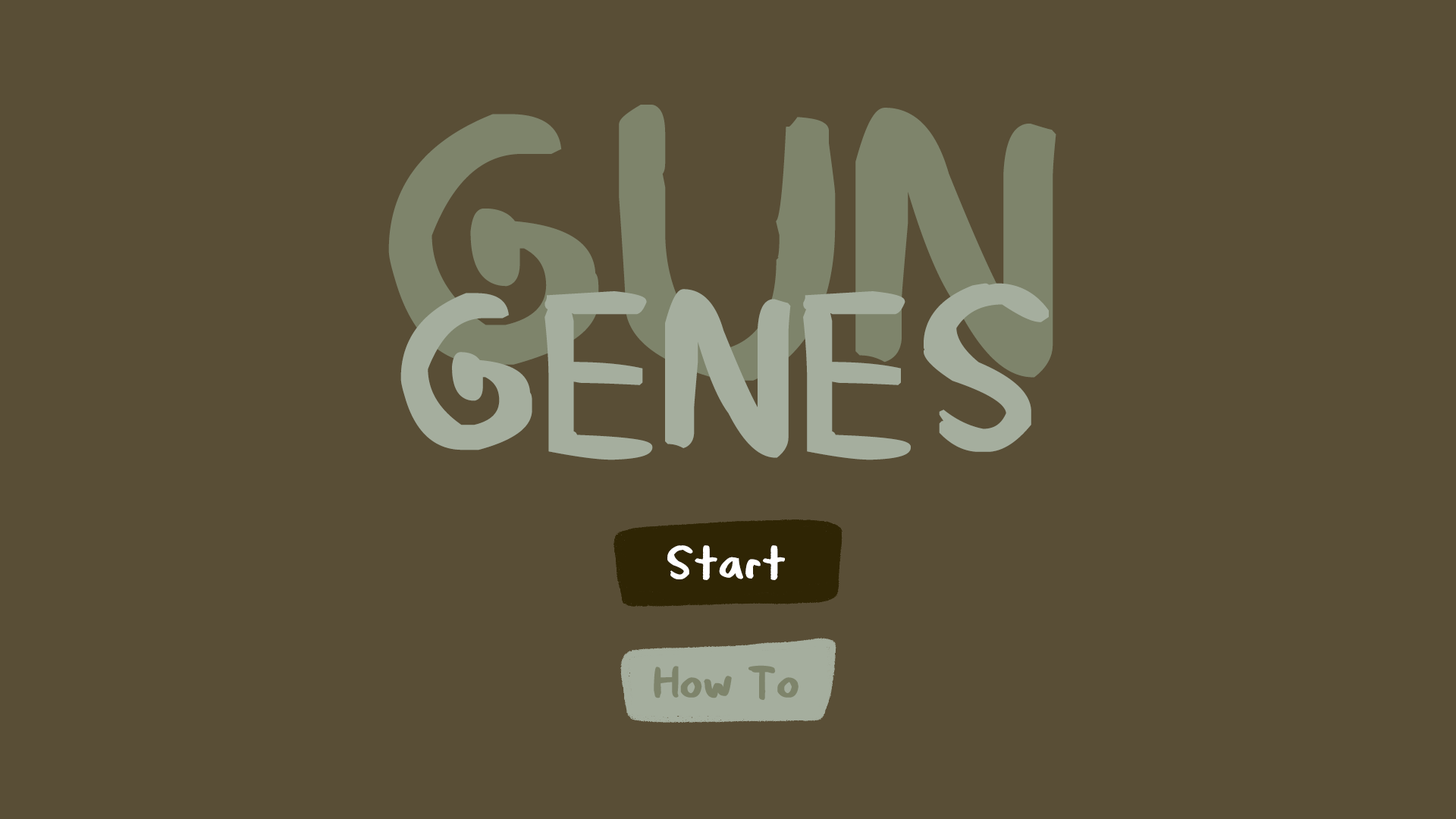
<style>
.page{position:relative;width:1456px;height:819px;background:#594e36}
.page>*{position:absolute;margin:0}
.t1{font:303.3px "Thunderman";color:#7e846b;font-weight:bold}
.t2{font:189.6px "Thunderman";color:#a5ae9e;font-weight:bold}
.t3{font:37.9px "Thunderman";color:#ffffff;font-weight:bold}
.t4{font:37.9px "Thunderman";color:#7e846b;font-weight:bold}
</style>
<div class="page">
<p class="t1" style="left:388px;top:105px;width:668px;height:276px">GUN</p>
<p class="t2" style="left:400px;top:283px;width:649px;height:177px">GENES</p>
<p class="t3" style="left:667px;top:545px;width:118px;height:35px">Start</p>
<p class="t4" style="left:654px;top:665px;width:145px;height:35px">How To</p>
</div>
